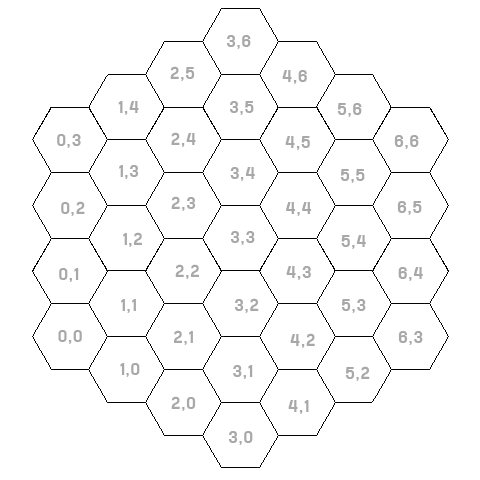
<style>
.page{position:relative;width:480px;height:480px;background:#ffffff}
.page>*{position:absolute;margin:0}
.t1{font:14.7px "FreeroadRegular";letter-spacing:0.08em;color:#a8a8a8}
</style>
<div class="page">
<p class="t1" style="left:226px;top:35px;width:25px;height:14px">3,6</p>
<p class="t1" style="left:170px;top:66px;width:25px;height:15px">2,5</p>
<p class="t1" style="left:282px;top:70px;width:25px;height:14px">4,6</p>
<p class="t1" style="left:118px;top:101px;width:21px;height:14px">1,4</p>
<p class="t1" style="left:229px;top:101px;width:25px;height:14px">3,5</p>
<p class="t1" style="left:337px;top:103px;width:25px;height:14px">5,6</p>
<p class="t1" style="left:57px;top:134px;width:24px;height:14px">0,3</p>
<p class="t1" style="left:171px;top:132px;width:25px;height:15px">2,4</p>
<p class="t1" style="left:285px;top:136px;width:25px;height:14px">4,5</p>
<p class="t1" style="left:394px;top:135px;width:25px;height:14px">6,6</p>
<p class="t1" style="left:119px;top:165px;width:20px;height:14px">1,3</p>
<p class="t1" style="left:230px;top:167px;width:25px;height:14px">3,4</p>
<p class="t1" style="left:340px;top:169px;width:25px;height:14px">5,5</p>
<p class="t1" style="left:171px;top:196px;width:25px;height:15px">2,3</p>
<p class="t1" style="left:61px;top:201px;width:24px;height:15px">0,2</p>
<p class="t1" style="left:286px;top:202px;width:26px;height:14px">4,4</p>
<p class="t1" style="left:397px;top:201px;width:25px;height:14px">6,5</p>
<p class="t1" style="left:123px;top:232px;width:19px;height:15px">1,2</p>
<p class="t1" style="left:230px;top:231px;width:25px;height:14px">3,3</p>
<p class="t1" style="left:341px;top:235px;width:25px;height:14px">5,4</p>
<p class="t1" style="left:59px;top:268px;width:20px;height:14px">0,1</p>
<p class="t1" style="left:175px;top:264px;width:24px;height:15px">2,2</p>
<p class="t1" style="left:286px;top:266px;width:25px;height:14px">4,3</p>
<p class="t1" style="left:398px;top:267px;width:25px;height:14px">6,4</p>
<p class="t1" style="left:121px;top:299px;width:15px;height:14px">1,1</p>
<p class="t1" style="left:234px;top:298px;width:25px;height:15px">3,2</p>
<p class="t1" style="left:341px;top:299px;width:25px;height:14px">5,3</p>
<p class="t1" style="left:58px;top:330px;width:24px;height:14px">0,0</p>
<p class="t1" style="left:174px;top:330px;width:19px;height:15px">2,1</p>
<p class="t1" style="left:290px;top:333px;width:25px;height:15px">4,2</p>
<p class="t1" style="left:398px;top:331px;width:25px;height:14px">6,3</p>
<p class="t1" style="left:120px;top:363px;width:20px;height:14px">1,0</p>
<p class="t1" style="left:233px;top:365px;width:20px;height:14px">3,1</p>
<p class="t1" style="left:345px;top:366px;width:25px;height:15px">5,2</p>
<p class="t1" style="left:171px;top:396px;width:25px;height:15px">2,0</p>
<p class="t1" style="left:288px;top:400px;width:21px;height:14px">4,1</p>
<p class="t1" style="left:228px;top:431px;width:25px;height:14px">3,0</p>
</div>
